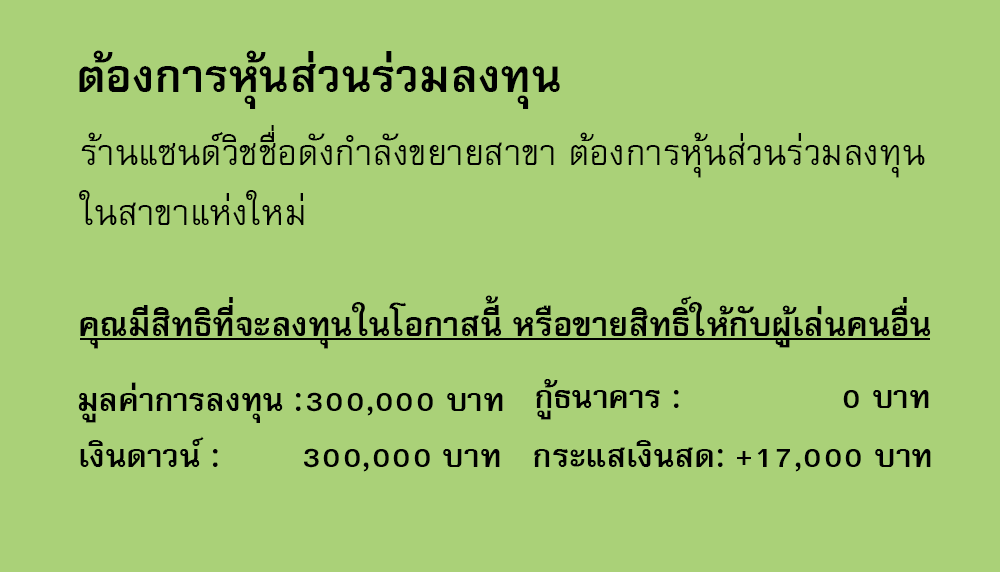
<style>
.page{position:relative;width:1000px;height:572px;background:#aad178}
.page>*{position:absolute;margin:0}
.t1{font:64px "FreesiaUPCBold";color:#000000}
.t2{font:50px/60px "FreesiaUPC";color:#000000}
.t3{font:47px "FreesiaUPCBold";color:#000000}
.t4{font:45px "FreesiaUPCBold";color:#000000}
</style>
<div class="page">
<p class="t1" style="left:79px;top:50px;width:481px;height:59px">ต้องการหุ้นส่วนร่วมลงทุน</p>
<p class="t2" style="left:79px;top:125px;width:846px;height:100px">ร้านแซนด์วิชชื่อดังกำลังขยายสาขา ต้องการหุ้นส่วนร่วมลงทุน<br>ในสาขาแห่งใหม่</p>
<p class="t3" style="left:80px;top:295px;width:851px;height:54px">คุณมีสิทธิที่จะลงทุนในโอกาสนี้ หรือขายสิทธิ์ให้กับผู้เล่นคนอื่น</p>
<p class="t4" style="left:78px;top:382px;width:425px;height:41px">มูลค่าการลงทุน :300,000 บาท</p>
<p class="t4" style="left:536px;top:379px;width:393px;height:41px">กู้ธนาคาร :                0 บาท</p>
<p class="t4" style="left:80px;top:436px;width:420px;height:36px">เงินดาวน์ :        300,000 บาท</p>
<p class="t4" style="left:534px;top:440px;width:397px;height:32px">กระแสเงินสด: +17,000 บาท</p>
</div>
